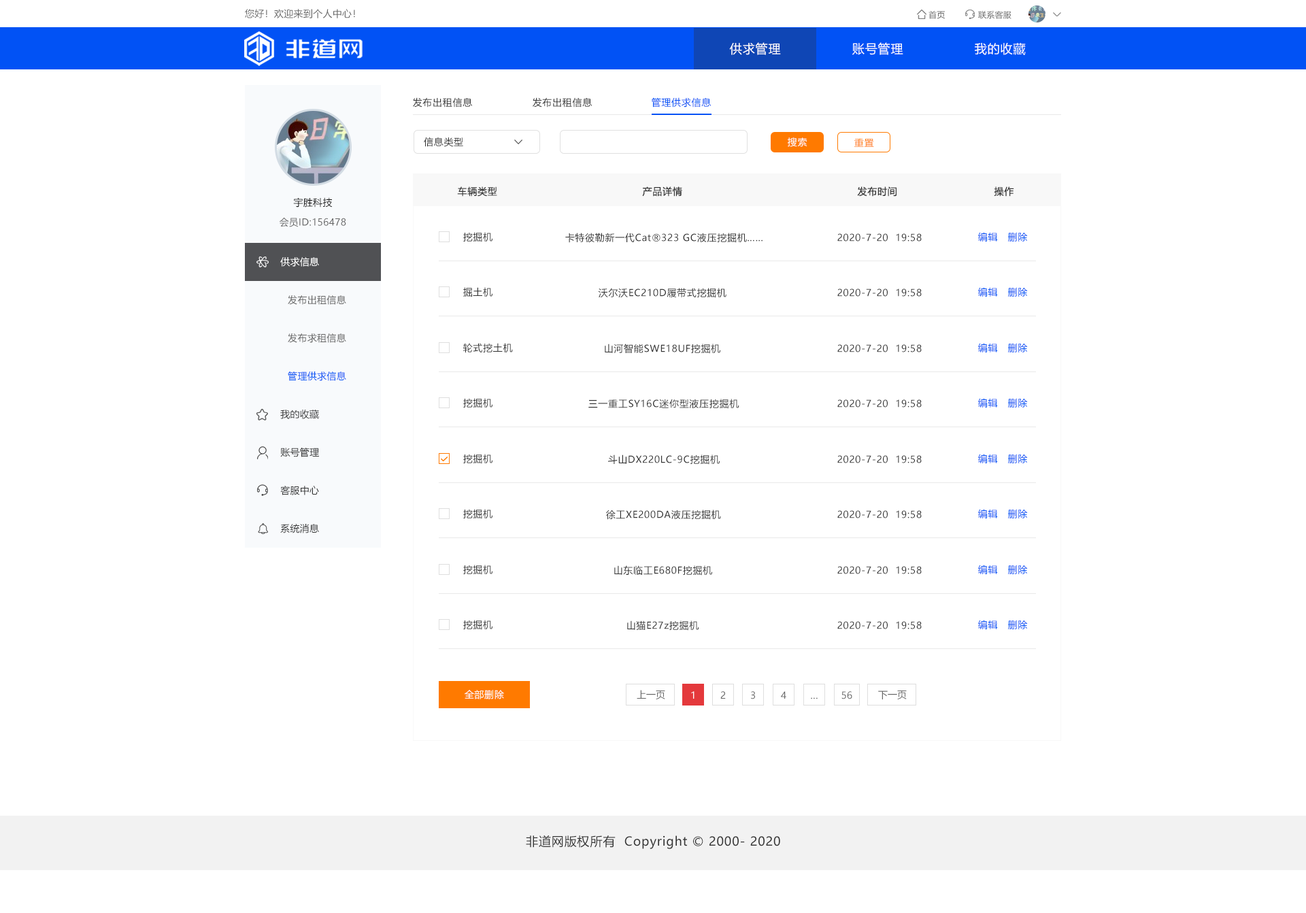
<style>
.page{position:relative;width:1306px;height:913px;background:#ffffff}
.page>*{position:absolute;margin:0}
.t1{font:9.5px "MicrosoftYaHei";letter-spacing:0.022em;color:#666666}
.t2{font:8.2px "MicrosoftYaHei";letter-spacing:0.022em;color:#666666}
.t3{font:12.2px "MicrosoftYaHei";letter-spacing:0.05em;color:#ffffff}
.t4{font:9.5px "MicrosoftYaHei";letter-spacing:0.05em;color:#333333}
.t5{font:9.5px "MicrosoftYaHei";letter-spacing:0.05em;color:#0152f5}
.t6{font:9.5px "MicrosoftYaHei";letter-spacing:0.05em;color:#ffffff}
.t7{font:9.5px "MicrosoftYaHei";letter-spacing:0.05em;color:#ff7a00}
.t8{font:9.5px "MicrosoftYaHei";letter-spacing:0.022em;color:#141414}
.t9{font:9.5px "MicrosoftYaHei";letter-spacing:0.022em;color:#ffffff}
.t10{font:9.5px "MicrosoftYaHei";letter-spacing:0.022em;color:#0152f5}
.t11{font:9.5px "MicrosoftYaHei";letter-spacing:0.022em;color:#333333}
.t12{font:9.5px "MicrosoftYaHei";color:#666666}
.t13{font:9.5px "MicrosoftYaHei";color:#ffffff}
.t14{font:12.2px "MicrosoftYaHei";letter-spacing:0.05em;color:#333333}
</style>
<div class="page">
<p class="t1" style="left:245px;top:9px;width:110px;height:9px">您好！欢迎来到个人中心！</p>
<p class="t2" style="left:929px;top:11px;width:16px;height:8px">首页</p>
<p class="t2" style="left:978px;top:11px;width:34px;height:8px">联系客服</p>
<p class="t3" style="left:729px;top:42px;width:52px;height:13px">供求管理</p>
<p class="t3" style="left:852px;top:42px;width:51px;height:13px">账号管理</p>
<p class="t3" style="left:975px;top:43px;width:51px;height:12px">我的收藏</p>
<p class="t4" style="left:413px;top:97px;width:60px;height:10px">发布出租信息</p>
<p class="t4" style="left:533px;top:97px;width:60px;height:10px">发布出租信息</p>
<p class="t5" style="left:652px;top:97px;width:60px;height:10px">管理供求信息</p>
<p class="t4" style="left:424px;top:137px;width:39px;height:10px">信息类型</p>
<p class="t6" style="left:788px;top:137px;width:19px;height:10px">搜索</p>
<p class="t7" style="left:854px;top:139px;width:20px;height:8px">重置</p>
<p class="t8" style="left:293px;top:197px;width:40px;height:10px">宇胜科技</p>
<p class="t4" style="left:457px;top:186px;width:40px;height:11px">车辆类型</p>
<p class="t4" style="left:642px;top:186px;width:40px;height:11px">产品详情</p>
<p class="t4" style="left:857px;top:186px;width:40px;height:11px">发布时间</p>
<p class="t4" style="left:994px;top:186px;width:20px;height:11px">操作</p>
<p class="t1" style="left:280px;top:218px;width:66px;height:9px">会员ID:156478</p>
<p class="t4" style="left:463px;top:232px;width:30px;height:10px">挖掘机</p>
<p class="t4" style="left:565px;top:233px;width:198px;height:10px">卡特彼勒新一代Cat®323 GC液压挖掘机……</p>
<p class="t4" style="left:837px;top:233px;width:85px;height:9px">2020-7-20  19:58</p>
<p class="t5" style="left:978px;top:232px;width:20px;height:10px">编辑</p>
<p class="t5" style="left:1008px;top:232px;width:20px;height:10px">删除</p>
<p class="t9" style="left:280px;top:257px;width:39px;height:10px">供求信息</p>
<p class="t4" style="left:463px;top:287px;width:30px;height:10px">掘土机</p>
<p class="t4" style="left:598px;top:288px;width:129px;height:10px">沃尔沃EC210D履带式挖掘机</p>
<p class="t4" style="left:837px;top:288px;width:85px;height:9px">2020-7-20  19:58</p>
<p class="t5" style="left:978px;top:287px;width:20px;height:10px">编辑</p>
<p class="t5" style="left:1008px;top:287px;width:20px;height:10px">删除</p>
<p class="t1" style="left:288px;top:295px;width:58px;height:10px">发布出租信息</p>
<p class="t1" style="left:288px;top:333px;width:58px;height:10px">发布求租信息</p>
<p class="t4" style="left:463px;top:343px;width:50px;height:10px">轮式挖土机</p>
<p class="t4" style="left:605px;top:344px;width:115px;height:10px">山河智能SWE18UF挖掘机</p>
<p class="t4" style="left:837px;top:344px;width:85px;height:8px">2020-7-20  19:58</p>
<p class="t5" style="left:978px;top:343px;width:20px;height:9px">编辑</p>
<p class="t5" style="left:1008px;top:343px;width:20px;height:9px">删除</p>
<p class="t10" style="left:288px;top:371px;width:58px;height:10px">管理供求信息</p>
<p class="t4" style="left:463px;top:398px;width:30px;height:10px">挖掘机</p>
<p class="t4" style="left:588px;top:399px;width:151px;height:10px">三一重工SY16C迷你型液压挖掘机</p>
<p class="t4" style="left:837px;top:399px;width:85px;height:8px">2020-7-20  19:58</p>
<p class="t5" style="left:978px;top:398px;width:20px;height:9px">编辑</p>
<p class="t5" style="left:1008px;top:398px;width:20px;height:9px">删除</p>
<p class="t11" style="left:280px;top:410px;width:39px;height:9px">我的收藏</p>
<p class="t11" style="left:280px;top:448px;width:39px;height:9px">账号管理</p>
<p class="t4" style="left:463px;top:454px;width:30px;height:10px">挖掘机</p>
<p class="t4" style="left:608px;top:454px;width:112px;height:11px">斗山DX220LC-9C挖掘机</p>
<p class="t4" style="left:837px;top:455px;width:85px;height:8px">2020-7-20  19:58</p>
<p class="t5" style="left:978px;top:454px;width:20px;height:9px">编辑</p>
<p class="t5" style="left:1008px;top:454px;width:20px;height:9px">删除</p>
<p class="t11" style="left:280px;top:486px;width:39px;height:9px">客服中心</p>
<p class="t4" style="left:463px;top:509px;width:30px;height:10px">挖掘机</p>
<p class="t4" style="left:606px;top:510px;width:115px;height:10px">徐工XE200DA液压挖掘机</p>
<p class="t5" style="left:978px;top:509px;width:20px;height:9px">编辑</p>
<p class="t5" style="left:1008px;top:509px;width:20px;height:9px">删除</p>
<p class="t4" style="left:837px;top:510px;width:85px;height:8px">2020-7-20  19:58</p>
<p class="t11" style="left:280px;top:524px;width:39px;height:9px">系统消息</p>
<p class="t4" style="left:463px;top:565px;width:30px;height:10px">挖掘机</p>
<p class="t4" style="left:614px;top:565px;width:98px;height:11px">山东临工E680F挖掘机</p>
<p class="t4" style="left:837px;top:566px;width:85px;height:8px">2020-7-20  19:58</p>
<p class="t5" style="left:978px;top:565px;width:20px;height:9px">编辑</p>
<p class="t5" style="left:1008px;top:565px;width:20px;height:9px">删除</p>
<p class="t4" style="left:463px;top:620px;width:30px;height:10px">挖掘机</p>
<p class="t4" style="left:627px;top:620px;width:72px;height:11px">山猫E27z挖掘机</p>
<p class="t4" style="left:837px;top:621px;width:85px;height:8px">2020-7-20  19:58</p>
<p class="t5" style="left:978px;top:620px;width:20px;height:9px">编辑</p>
<p class="t5" style="left:1008px;top:620px;width:20px;height:9px">删除</p>
<p class="t6" style="left:465px;top:690px;width:39px;height:9px">全部删除</p>
<p class="t12" style="left:637px;top:690px;width:28px;height:9px">上一页</p>
<p class="t13" style="left:691px;top:691px;width:4px;height:8px">1</p>
<p class="t12" style="left:720px;top:691px;width:6px;height:8px">2</p>
<p class="t12" style="left:751px;top:691px;width:4px;height:8px">3</p>
<p class="t12" style="left:781px;top:691px;width:5px;height:8px">4</p>
<p class="t12" style="left:811px;top:697px;width:7px;height:2px">…</p>
<p class="t12" style="left:842px;top:691px;width:10px;height:8px">56</p>
<p class="t12" style="left:878px;top:690px;width:29px;height:9px">下一页</p>
<p class="t14" style="left:526px;top:835px;width:254px;height:14px">非道网版权所有  Copyright © 2000- 2020</p>
</div>
